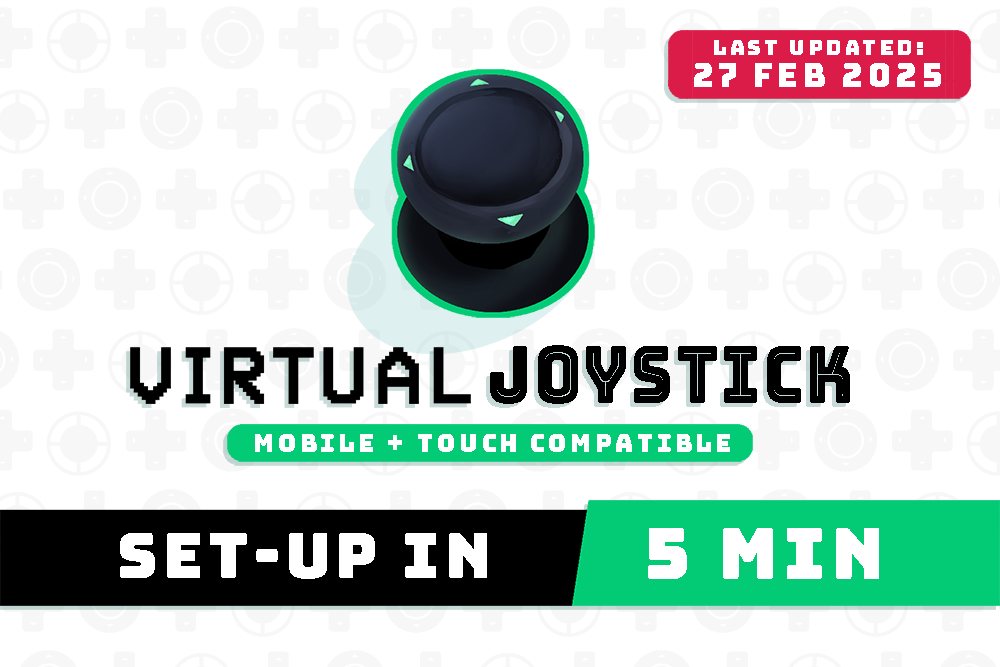
<style>
.page{position:relative;width:1000px;height:667px;background:#ffffff}
.page>*{position:absolute;margin:0}
.t1{font:20.8px/32.1px "Bungee-Regular";letter-spacing:0.138em;color:#ffffff}
.t2{font:32.1px/32.1px "Bungee-Regular";letter-spacing:0.138em;color:#ffffff}
.t3{font:79px "Bungee-Inline";letter-spacing:0.04em;color:#000000;scale:0.82 1}
.t4{font:24.6px "Bungee-Regular";letter-spacing:0.138em;color:#ffffff}
.t5{font:62px "Bungee-Regular";letter-spacing:0.08em;color:#ffffff}
.t6{font:70.7px "Bungee-Regular";letter-spacing:0.08em;color:#ffffff}
</style>
<div class="page">
<p class="t1" style="left:694px;top:40px;width:247px;height:47px;text-align:center">Last Updated:<br><span class="t2">27 Feb 2025</span></p>
<p class="t3" style="left:490px;top:345px;width:360px;height:59px">joystick</p>
<p class="t4" style="left:255px;top:434px;width:475px;height:18px">MOBILE + TOUCH COMPATIBLE</p>
<p class="t5" style="left:120px;top:533px;width:367px;height:46px">set-up in</p>
<p class="t6" style="left:648px;top:528px;width:231px;height:51px">5 min</p>
</div>
